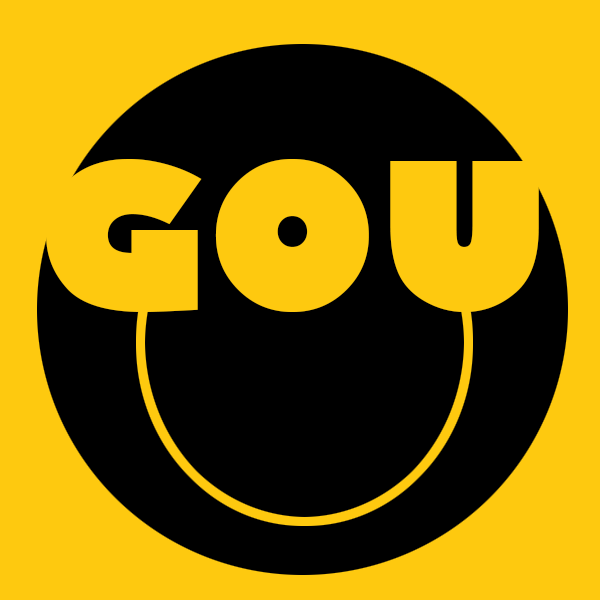
<style>
.page{position:relative;width:600px;height:600px;background:#fec90f}
.page>*{position:absolute;margin:0}
.t1{font:200px "GillSans-UltraBold";color:#fec90f}
</style>
<div class="page">
<p class="t1" style="left:46px;top:159px;width:493px;height:153px">GOU</p>
</div>
